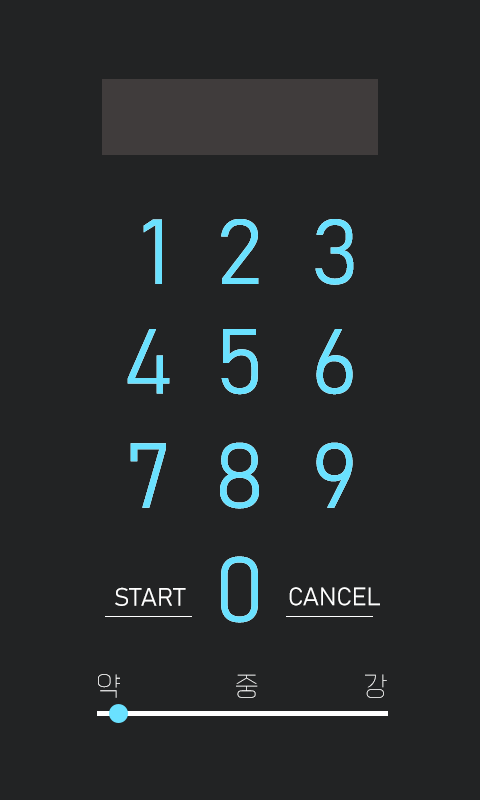
<style>
.page{position:relative;width:480px;height:800px;background:#222324}
.page>*{position:absolute;margin:0}
.t1{font:90.7px "Bahnschrift-Light";color:#6ae1ff}
.t2{font:25px "Bahnschrift-Light";color:#ffffff;text-transform:uppercase}
.t3{font:24.9px "KoreanYNSJG1-R";text-transform:uppercase}
.t4{font:24.9px "KoreanYNSJG1-R";color:#ffffff;text-transform:uppercase}
</style>
<div class="page">
<p class="t1" style="left:143px;top:219px;width:19px;height:65px">1</p>
<p class="t1" style="left:143px;top:219px;width:19px;height:65px">1</p>
<p class="t1" style="left:221px;top:219px;width:38px;height:65px">2</p>
<p class="t1" style="left:221px;top:219px;width:38px;height:65px">2</p>
<p class="t1" style="left:315px;top:219px;width:39px;height:66px">3</p>
<p class="t1" style="left:315px;top:219px;width:39px;height:66px">3</p>
<p class="t1" style="left:127px;top:329px;width:43px;height:65px">4</p>
<p class="t1" style="left:127px;top:329px;width:43px;height:65px">4</p>
<p class="t1" style="left:221px;top:329px;width:37px;height:66px">5</p>
<p class="t1" style="left:221px;top:329px;width:37px;height:66px">5</p>
<p class="t1" style="left:316px;top:329px;width:37px;height:66px">6</p>
<p class="t1" style="left:316px;top:329px;width:37px;height:66px">6</p>
<p class="t1" style="left:130px;top:443px;width:36px;height:65px">7</p>
<p class="t1" style="left:130px;top:443px;width:36px;height:65px">7</p>
<p class="t1" style="left:220px;top:442px;width:39px;height:67px">8</p>
<p class="t1" style="left:220px;top:442px;width:39px;height:67px">8</p>
<p class="t1" style="left:316px;top:442px;width:37px;height:66px">9</p>
<p class="t1" style="left:316px;top:442px;width:37px;height:66px">9</p>
<p class="t1" style="left:221px;top:556px;width:37px;height:67px">0</p>
<p class="t1" style="left:221px;top:556px;width:37px;height:67px">0</p>
<p class="t2" style="left:115px;top:587px;width:71px;height:19px">start</p>
<p class="t2" style="left:289px;top:587px;width:91px;height:19px">cancel</p>
<p class="t3" style="left:98px;top:674px;width:22px;height:24px">약</p>
<p class="t4" style="left:236px;top:674px;width:22px;height:24px">중</p>
<p class="t3" style="left:365px;top:674px;width:22px;height:24px">강</p>
</div>
